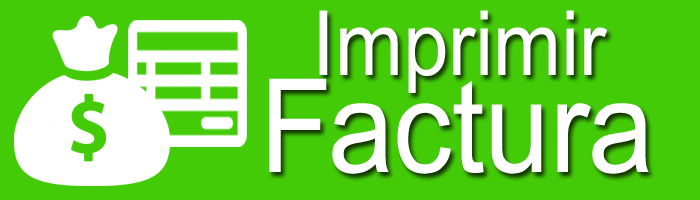
<style>
.page{position:relative;width:700px;height:200px;background:#44cb08}
.page>*{position:absolute;margin:0}
.t1{font:90px "ArialMT";color:#ffffff;scale:0.9 1}
.t2{font:130px "ArialMT";color:#ffffff;scale:0.9 1}
</style>
<div class="page">
<p class="t1" style="left:319px;top:10px;width:289px;height:83px">Imprimir</p>
<p class="t2" style="left:269px;top:78px;width:380px;height:96px">Factura</p>
</div>
